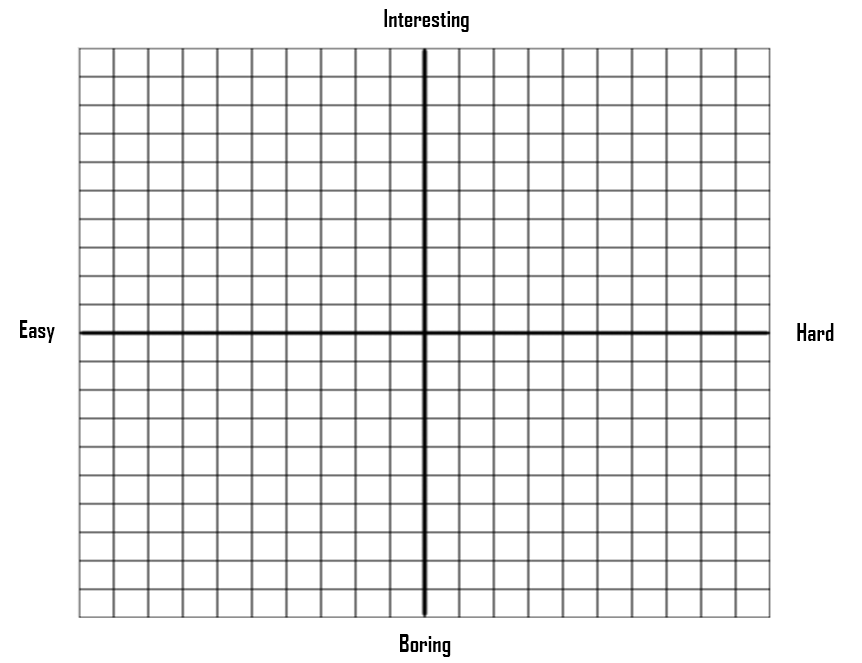
<style>
.page{position:relative;width:862px;height:663px;background:#ffffff}
.page>*{position:absolute;margin:0}
.t1{font:23.1px "AgencyFB-Bold";color:#000000}
</style>
<div class="page">
<p class="t1" style="left:384px;top:9px;width:85px;height:23px">Interesting</p>
<p class="t1" style="left:20px;top:320px;width:35px;height:23px">Easy</p>
<p class="t1" style="left:797px;top:323px;width:37px;height:18px">Hard</p>
<p class="t1" style="left:400px;top:634px;width:51px;height:23px">Boring</p>
</div>
